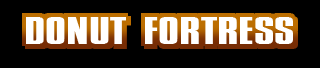
<style>
.page{position:relative;width:320px;height:68px;background:#000000}
.page>*{position:absolute;margin:0}
.t1{font:40px "CompactaD";color:#ffffff;scale:1.66 1}
</style>
<div class="page">
<p class="t1" style="left:26px;top:17px;width:267px;height:27px">DONUT FORTRESS</p>
</div>
